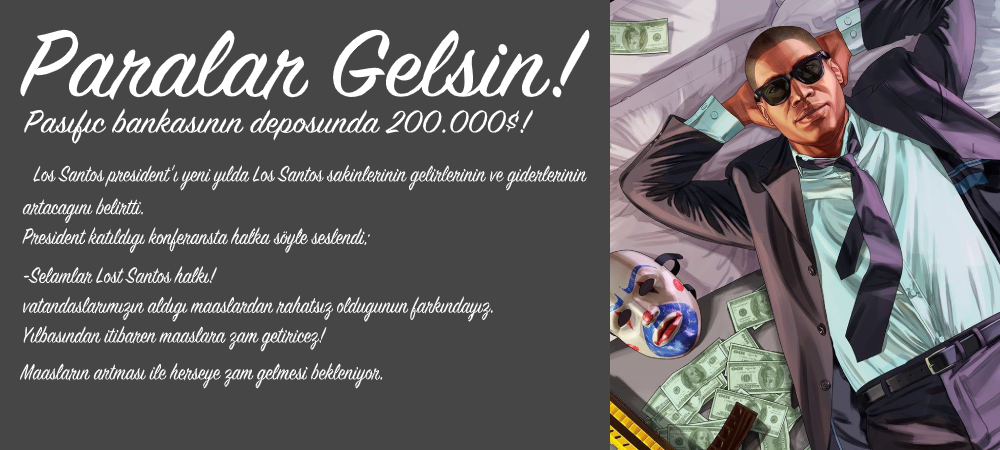
<style>
.page{position:relative;width:1000px;height:450px;background:#464646}
.page>*{position:absolute;margin:0}
.t1{font:104.8px "SignPainter-HouseScript";color:#ffffff;scale:1.07 1}
.t2{font:35.8px "SignPainter-HouseScript";color:#ffffff;scale:1.07 1}
.t3{font:24.8px "SignPainter-HouseScript";color:#ffffff;scale:0.85 1}
</style>
<div class="page">
<p class="t1" style="left:20px;top:29px;width:570px;height:71px">Paralar Gelsin!</p>
<p class="t2" style="left:24px;top:108px;width:510px;height:36px">Pasıfıc bankasının deposunda 200.000$!</p>
<p class="t3" style="left:33px;top:164px;width:554px;height:27px">Los Santos president'ı yeni yılda Los Santos sakinlerinin gelirlerinin ve giderlerinin</p>
<p class="t3" style="left:22px;top:197px;width:348px;height:56px">artacagını belirtti. <br>President katıldıgı konferansta halka söyle seslendi;</p>
<p class="t3" style="left:22px;top:265px;width:471px;height:87px">-Selamlar Lost Santos halkı! <br>vatandaslarımızın aldıgı maaslardan rahatsız oldugunun farkındayız.<br>Yılbasından itibaren maaslara zam getiricez!</p>
<p class="t3" style="left:20px;top:362px;width:363px;height:27px">Maasların artması ile herseye zam gelmesi bekleniyor.</p>
</div>
